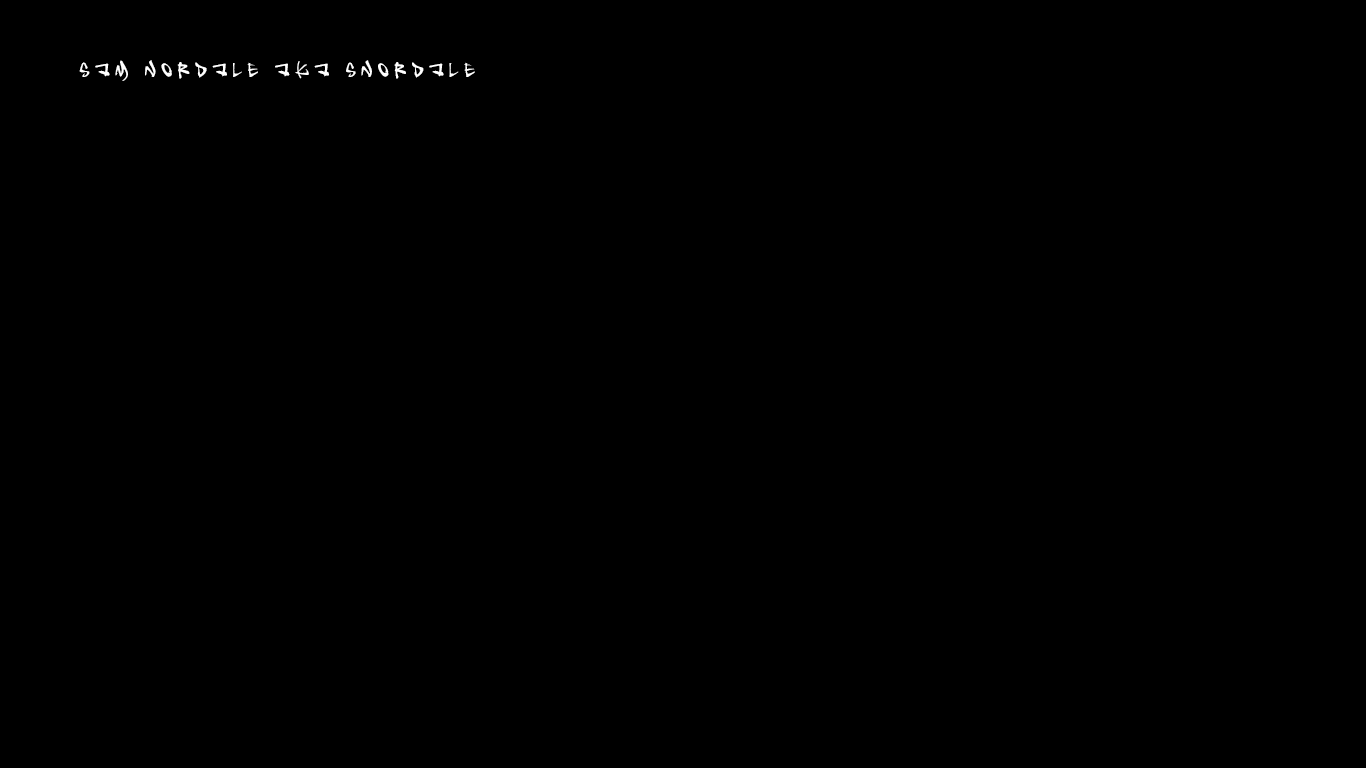
<style>
.page{position:relative;width:1366px;height:768px;background:#000000}
.page>*{position:absolute;margin:0}
.t1{font:20px "Insane";letter-spacing:0.3em;color:#ffffff}
</style>
<div class="page">
<p class="t1" style="left:79px;top:60px;width:396px;height:21px">sam nordale aka snordale</p>
</div>
